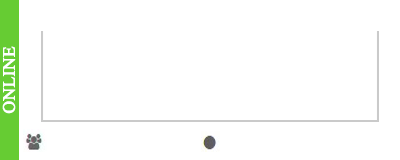
<style>
.page{position:relative;width:400px;height:160px;background:#ffffff}
.page>*{position:absolute;margin:0}
.t1{font:17.2px "TimesNewRomanPSMT";color:#ffffff;text-transform:uppercase;font-weight:bold}
</style>
<div class="page">
<p class="t1" style="left:2px;top:46px;width:14px;height:68px;rotate:-90deg">Online</p>
</div>
